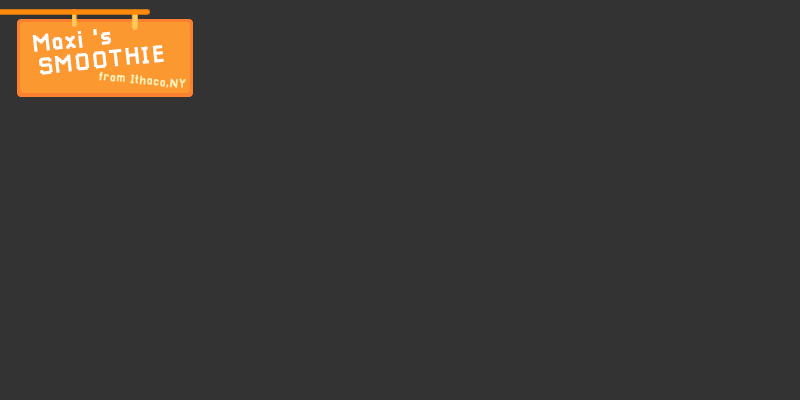
<style>
.page{position:relative;width:800px;height:400px;background:#333333}
.page>*{position:absolute;margin:0}
.t1{font:24.5px "Pixellari";letter-spacing:0.03em;color:#ffffff}
.t2{font:12.2px "Pixellari";letter-spacing:0.03em;color:#f8f1b4}
</style>
<div class="page">
<p class="t1" style="left:32px;top:28px;width:79px;height:24px;rotate:-6deg">Maxi 's</p>
<p class="t1" style="left:39px;top:45px;width:125px;height:30px;rotate:-6deg">SMOOTHIE</p>
<p class="t2" style="left:99px;top:71px;width:87px;height:17px;rotate:6deg">from Ithaca,NY</p>
</div>
